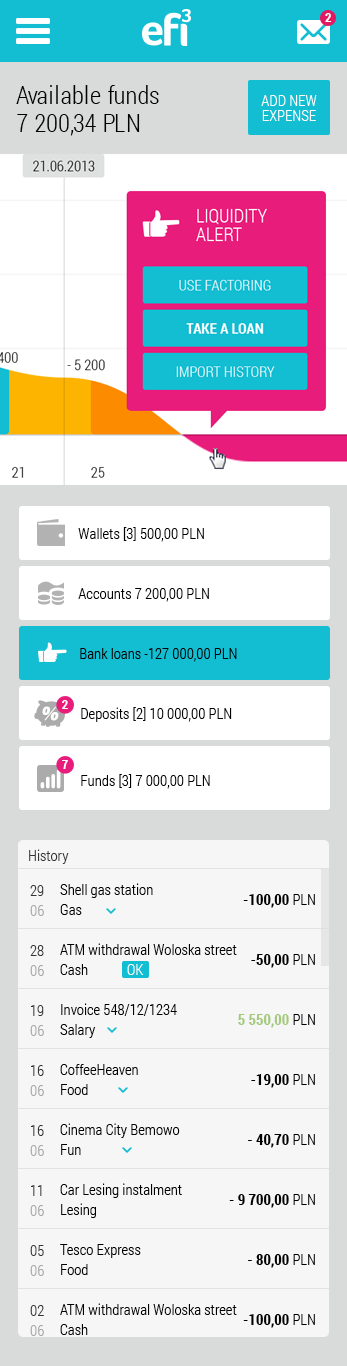
<style>
.page{position:relative;width:347px;height:1366px;background:#f6f6f6}
.page>*{position:absolute;margin:0}
.t1{font:13px "RobotoCondensed-Bold";color:#ffffff;scale:1.04 1}
.t2{font:25px "RobotoCondensed-Light";color:#000000}
.t3{font:15px/15px "RobotoCondensed-Light";color:#ffffff;text-transform:uppercase}
.t4{font:15px "RobotoCondensed-Light";color:#000000}
.t5{font:15px "RobotoCondensed-Light";color:#343434}
.t6{font:15px/20px "RobotoCondensed-Light"}
.t7{font:15px/20px "RobotoCondensed-Light";color:#000000}
.t8{font:15px/20px "RobotoCondensed-Bold";color:#000000}
.t9{font:15px/20px "RobotoCondensed-Bold";color:#a3ca7c}
.t10{font:15px "RobotoCondensed-Light";color:#ffffff}
</style>
<div class="page">
<p class="t1" style="left:325px;top:13px;width:7px;height:9px">2</p>
<p class="t2" style="left:16px;top:85px;width:143px;height:19px">Available funds</p>
<p class="t3" style="left:261px;top:95px;width:56px;height:26px;text-align:center">Add new<br>expense</p>
<p class="t2" style="left:17px;top:114px;width:123px;height:22px">7 200,34 PLN</p>
<p class="t4" style="left:78px;top:527px;width:126px;height:15px">Wallets [3] 500,00 PLN</p>
<p class="t4" style="left:78px;top:588px;width:131px;height:14px">Accounts 7 200,00 PLN</p>
<p class="t4" style="left:80px;top:648px;width:157px;height:14px">Bank loans -127 000,00 PLN</p>
<p class="t1" style="left:62px;top:700px;width:6px;height:9px">2</p>
<p class="t4" style="left:81px;top:707px;width:151px;height:15px">Deposits [2] 10 000,00 PLN</p>
<p class="t1" style="left:62px;top:760px;width:6px;height:9px">7</p>
<p class="t4" style="left:81px;top:774px;width:129px;height:15px">Funds [3] 7 000,00 PLN</p>
<p class="t5" style="left:29px;top:849px;width:40px;height:15px">History</p>
<p class="t6" style="left:30px;top:885px;width:14px;height:451px">29<br>06<br><br>28<br>06<br><br>19<br>06<br><br>16<br>06<br><br>16<br>06<br><br>11<br>06<br><br>05<br>06<br><br>02<br>06</p>
<p class="t7" style="left:60px;top:883px;width:177px;height:452px">Shell gas station<br>Gas<br><br>ATM withdrawal Woloska street<br>Cash<br><br>Invoice 548/12/1234<br>Salary<br><br>CoffeeHeaven<br>Food<br><br>Cinema City Bemowo<br>Fun<br><br>Car Lesing instalment<br>Lesing<br><br>Tesco Express<br>Food<br><br>ATM withdrawal Woloska street<br>Cash</p>
<p class="t8" style="left:229px;top:894px;width:86px;height:434px;text-align:right">-100,00 <span class="t7">PLN<br><br><br></span>-50,00 <span class="t7">PLN<br><br><br></span><span class="t9">5 550,00 </span><span class="t7">PLN<br><br><br></span>-19,00 <span class="t7">PLN<br><br><br></span>- 40,70 <span class="t7">PLN<br><br><br></span>- 9 700,00 <span class="t7">PLN<br><br><br></span>- 80,00 <span class="t7">PLN<br><br><br></span>-100,00 <span class="t7">PLN</span></p>
<p class="t10" style="left:127px;top:964px;width:17px;height:11px">OK</p>
</div>
